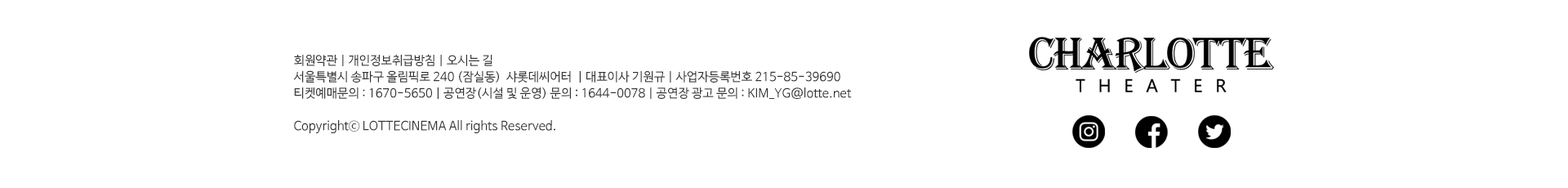
<style>
.page{position:relative;width:1568px;height:188px;background:#ffffff}
.page>*{position:absolute;margin:0}
.t1{font:12.2px/16.3px "NanumBarunGothic-YetHangul";color:#333333}
</style>
<div class="page">
<p class="t1" style="left:293px;top:54px;width:559px;height:79px">회원약관 | 개인정보취급방침 | 오시는 길<br>서울특별시 송파구 올림픽로 240 (잠실동)  샤롯데씨어터  | 대표이사 기원규 | 사업자등록번호 215-85-39690 <br>티켓예매문의 : 1670-5650 | 공연장(시설 및 운영) 문의 : 1644-0078 | 공연장 광고 문의 : KIM_YG@lotte.net<br><br>Copyrightⓒ LOTTECINEMA All rights Reserved.</p>
</div>
